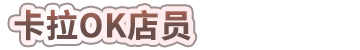
<style>
.page{position:relative;width:360px;height:50px;background:#ffffff}
.page>*{position:absolute;margin:0}
.t1{font:32px "SourceHanSansSC-Bold";font-weight:bold}
</style>
<div class="page">
<p class="t1" style="left:14px;top:9px;width:177px;height:32px">卡拉OK店员</p>
</div>
